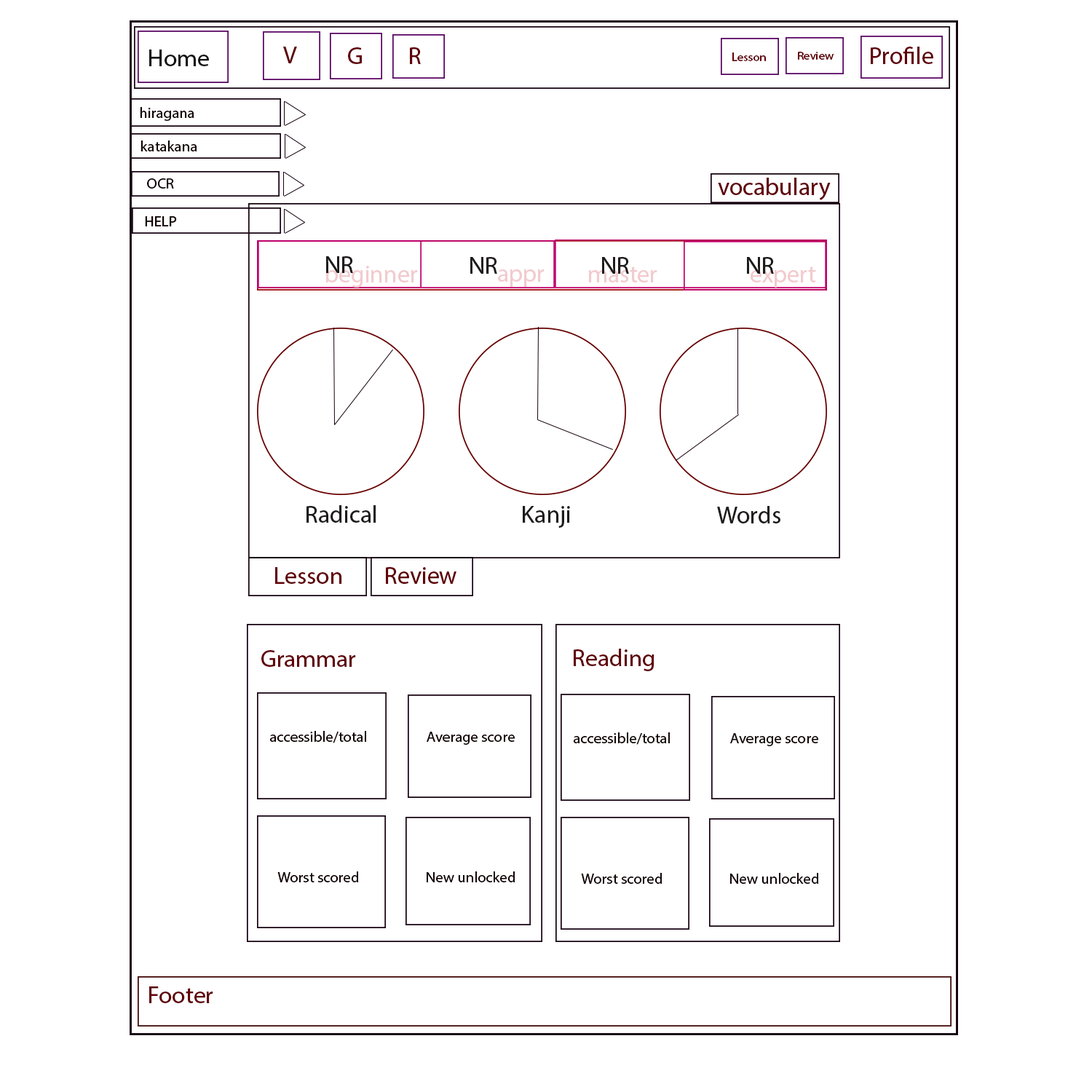
<style>
.page{position:relative;width:1092px;height:1092px;background:#ffffff}
.page>*{position:absolute;margin:0}
.t1{font:24.3px "MyriadHebrew-Regular";color:#141111}
.t2{font:24.3px "MyriadHebrew-Regular";color:#600006}
.t3{font:24.2px "MyriadHebrew-Regular";color:#600006}
.t4{font:12.2px "MyriadHebrew-Regular";color:#600006}
.t5{font:11.9px "MyriadHebrew-Regular";color:#600006}
.t6{font:24.4px "MyriadHebrew-Regular";color:#600006}
.t7{font:15.2px "MyriadHebrew-Regular";color:#120304}
.t8{font:24.4px "MyriadHebrew-Regular";color:#1e1b1b}
.t9{font:24.3px "MyriadHebrew-Regular";color:#f2cbce}
</style>
<div class="page">
<p class="t1" style="left:149px;top:50px;width:60px;height:16px">Home</p>
<p class="t2" style="left:283px;top:47px;width:14px;height:16px">V</p>
<p class="t3" style="left:348px;top:47px;width:14px;height:17px">G</p>
<p class="t2" style="left:410px;top:47px;width:11px;height:17px">R</p>
<p class="t4" style="left:732px;top:52px;width:34px;height:9px">Lesson</p>
<p class="t5" style="left:798px;top:52px;width:36px;height:8px">Review</p>
<p class="t6" style="left:871px;top:47px;width:62px;height:17px">Profile</p>
<p class="t7" style="left:140px;top:107px;width:54px;height:14px">hiragana</p>
<p class="t7" style="left:141px;top:141px;width:56px;height:10px">katakana</p>
<p class="t7" style="left:147px;top:178px;width:27px;height:11px">OCR</p>
<p class="t6" style="left:718px;top:178px;width:113px;height:22px">vocabulary</p>
<p class="t8" style="left:326px;top:256px;width:27px;height:17px">NR</p>
<p class="t8" style="left:470px;top:257px;width:27px;height:17px">NR</p>
<p class="t8" style="left:602px;top:257px;width:27px;height:17px">NR</p>
<p class="t8" style="left:747px;top:257px;width:27px;height:17px">NR</p>
<p class="t9" style="left:498px;top:269px;width:47px;height:18px">appr</p>
<p class="t9" style="left:751px;top:266px;width:65px;height:22px">expert</p>
<p class="t8" style="left:306px;top:505px;width:70px;height:18px">Radical</p>
<p class="t8" style="left:523px;top:506px;width:47px;height:22px">Kanji</p>
<p class="t8" style="left:717px;top:506px;width:63px;height:17px">Words</p>
<p class="t2" style="left:275px;top:567px;width:67px;height:17px">Lesson</p>
<p class="t6" style="left:386px;top:567px;width:70px;height:17px">Review</p>
<p class="t2" style="left:261px;top:650px;width:95px;height:17px">Grammar</p>
<p class="t2" style="left:574px;top:649px;width:80px;height:22px">Reading</p>
<p class="t7" style="left:269px;top:731px;width:97px;height:12px">accessible/total</p>
<p class="t7" style="left:427px;top:732px;width:88px;height:13px">Average score</p>
<p class="t7" style="left:573px;top:732px;width:97px;height:13px">accessible/total</p>
<p class="t7" style="left:730px;top:733px;width:88px;height:13px">Average score</p>
<p class="t7" style="left:277px;top:871px;width:82px;height:11px">Worst scored</p>
<p class="t7" style="left:427px;top:871px;width:88px;height:11px">New unlocked</p>
<p class="t7" style="left:581px;top:873px;width:81px;height:11px">Worst scored</p>
<p class="t7" style="left:730px;top:873px;width:89px;height:11px">New unlocked</p>
<p class="t2" style="left:149px;top:986px;width:64px;height:17px">Footer</p>
</div>
